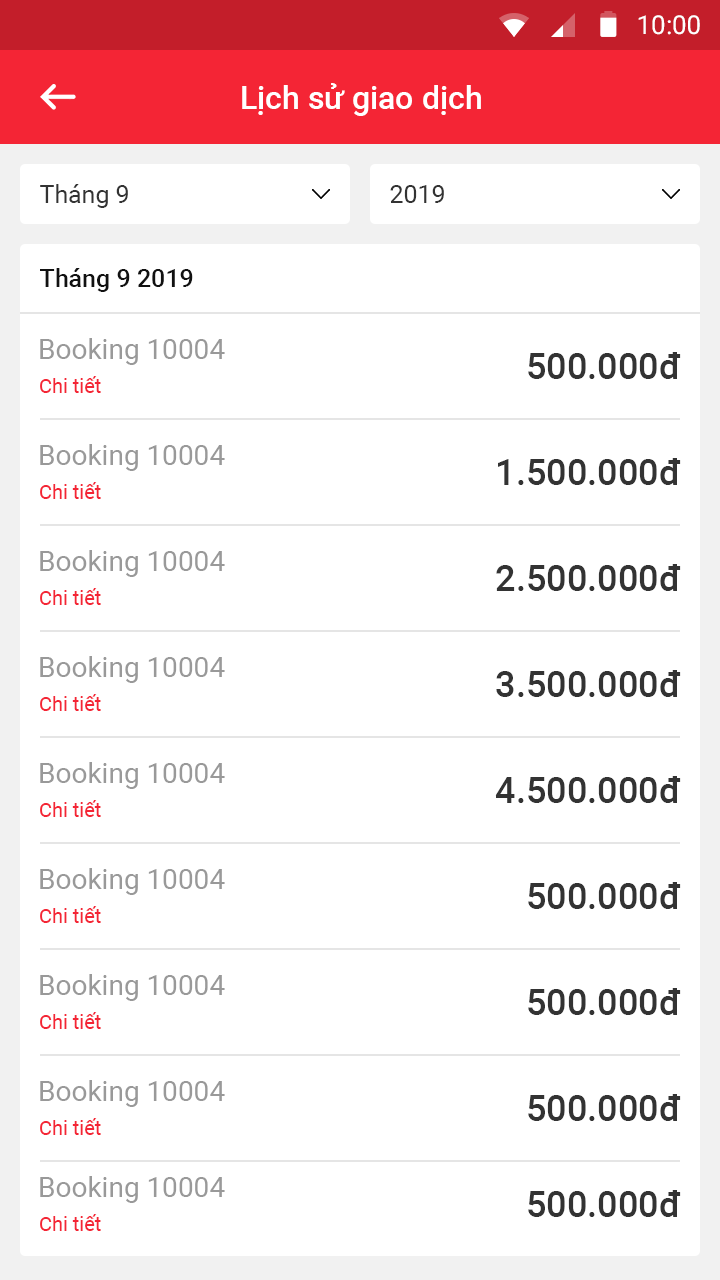
<style>
.page{position:relative;width:720px;height:1280px;background:#ffffff}
.page>*{position:absolute;margin:0}
.t1{font:26px "Roboto-Regular";color:#ffffff}
.t2{font:32px "Roboto-Medium";color:#ffffff}
.t3{font:25px "Roboto-Regular";color:#333333}
.t4{font:25px "Roboto-Medium";color:#111111}
.t5{font:28px "Roboto-Regular";color:#999999}
.t6{font:36px "Roboto-Medium";color:#333333}
.t7{font:20px "Roboto-Regular";color:#f42535}
</style>
<div class="page">
<p class="t1" style="left:638px;top:15px;width:62px;height:20px">10:00</p>
<p class="t2" style="left:242px;top:83px;width:239px;height:33px">Lịch sử giao dịch</p>
<p class="t3" style="left:40px;top:184px;width:88px;height:24px">Tháng 9</p>
<p class="t3" style="left:390px;top:185px;width:54px;height:18px">2019</p>
<p class="t4" style="left:40px;top:268px;width:153px;height:24px">Tháng 9 2019</p>
<p class="t5" style="left:40px;top:338px;width:185px;height:27px">Booking 10004</p>
<p class="t6" style="left:528px;top:352px;width:153px;height:27px">500.000đ</p>
<p class="t7" style="left:40px;top:376px;width:61px;height:17px">Chi tiết</p>
<p class="t5" style="left:40px;top:444px;width:185px;height:27px">Booking 10004</p>
<p class="t6" style="left:498px;top:458px;width:183px;height:27px">1.500.000đ</p>
<p class="t7" style="left:40px;top:482px;width:61px;height:17px">Chi tiết</p>
<p class="t5" style="left:40px;top:550px;width:185px;height:27px">Booking 10004</p>
<p class="t6" style="left:496px;top:564px;width:185px;height:27px">2.500.000đ</p>
<p class="t7" style="left:40px;top:588px;width:61px;height:17px">Chi tiết</p>
<p class="t5" style="left:40px;top:656px;width:185px;height:27px">Booking 10004</p>
<p class="t6" style="left:496px;top:670px;width:185px;height:27px">3.500.000đ</p>
<p class="t7" style="left:40px;top:694px;width:61px;height:17px">Chi tiết</p>
<p class="t5" style="left:40px;top:762px;width:185px;height:27px">Booking 10004</p>
<p class="t6" style="left:495px;top:776px;width:186px;height:27px">4.500.000đ</p>
<p class="t7" style="left:40px;top:800px;width:61px;height:17px">Chi tiết</p>
<p class="t5" style="left:40px;top:868px;width:185px;height:27px">Booking 10004</p>
<p class="t6" style="left:528px;top:882px;width:153px;height:27px">500.000đ</p>
<p class="t7" style="left:40px;top:906px;width:61px;height:17px">Chi tiết</p>
<p class="t5" style="left:40px;top:974px;width:185px;height:27px">Booking 10004</p>
<p class="t6" style="left:528px;top:988px;width:153px;height:27px">500.000đ</p>
<p class="t7" style="left:40px;top:1012px;width:61px;height:17px">Chi tiết</p>
<p class="t5" style="left:40px;top:1080px;width:185px;height:27px">Booking 10004</p>
<p class="t6" style="left:528px;top:1094px;width:153px;height:27px">500.000đ</p>
<p class="t7" style="left:40px;top:1118px;width:61px;height:17px">Chi tiết</p>
<p class="t5" style="left:40px;top:1176px;width:185px;height:27px">Booking 10004</p>
<p class="t6" style="left:528px;top:1190px;width:153px;height:27px">500.000đ</p>
<p class="t7" style="left:40px;top:1214px;width:61px;height:17px">Chi tiết</p>
</div>
